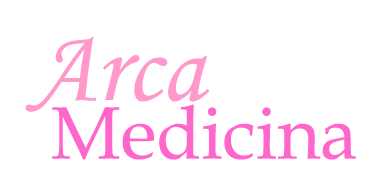
<style>
.page{position:relative;width:382px;height:190px;background:#ffffff}
.page>*{position:absolute;margin:0}
.t1{font:103px "MonotypeCorsiva";color:#ff99cc}
.t2{font:74px "BookAntiqua";color:#ff66cc}
</style>
<div class="page">
<p class="t1" style="left:25px;top:36px;width:185px;height:76px">Arca</p>
<p class="t2" style="left:52px;top:104px;width:304px;height:56px">Medicina</p>
</div>
